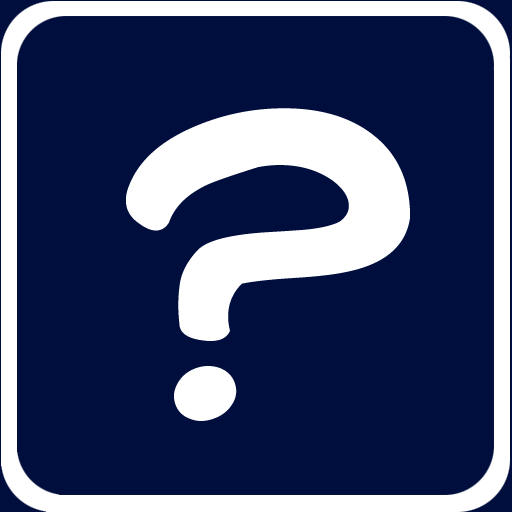
<style>
.page{position:relative;width:512px;height:512px;background:#000e3d}
.page>*{position:absolute;margin:0}
.t1{font:360.4px "KidKosmic";letter-spacing:0.04em;color:#ffffff}
</style>
<div class="page">
<p class="t1" style="left:126px;top:108px;width:284px;height:313px">?</p>
</div>
